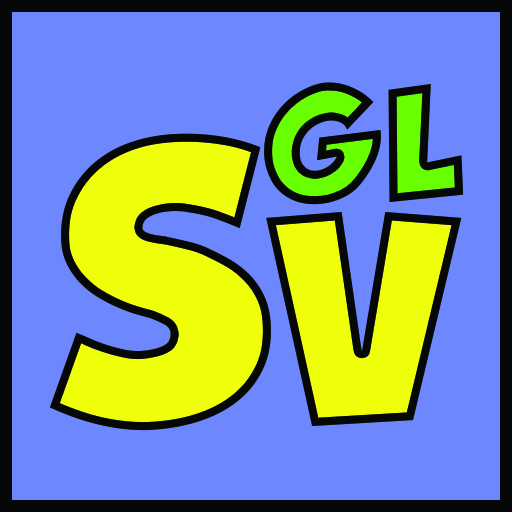
<style>
.page{position:relative;width:512px;height:512px;background:#6d87ff}
.page>*{position:absolute;margin:0}
.t1{font:140px "GROBOLD";letter-spacing:0.025em}
.t2{font:350px "GROBOLD";letter-spacing:0.025em;color:#efff09}
</style>
<div class="page">
<p class="t1" style="left:264px;top:82px;width:200px;height:123px">GL</p>
<p class="t2" style="left:49px;top:133px;width:413px;height:298px">Sv</p>
</div>
